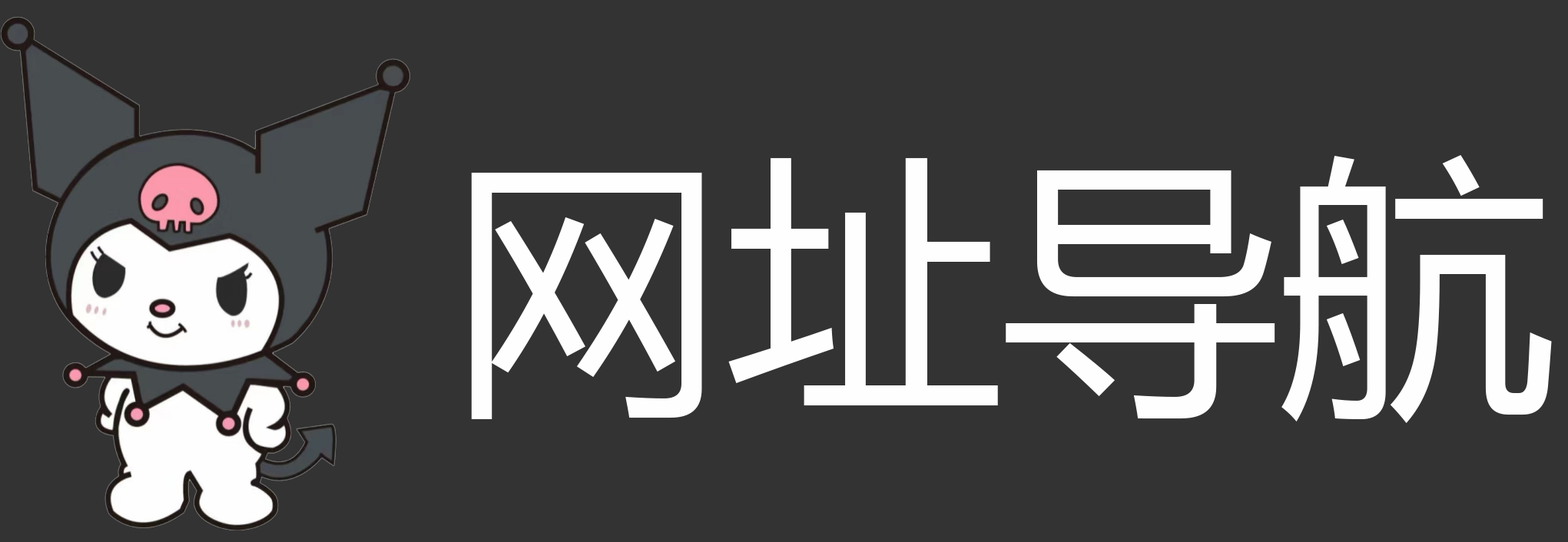
<style>
.page{position:relative;width:1568px;height:542px;background:#333333}
.page>*{position:absolute;margin:0}
.t1{font:276.6px "MicrosoftYaHei";color:#fefefe}
</style>
<div class="page">
<p class="t1" style="left:471px;top:154px;width:1081px;height:269px">网址导航</p>
</div>
